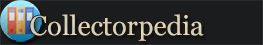
<style>
.page{position:relative;width:263px;height:45px;background:#1b1c1d}
.page>*{position:absolute;margin:0}
.t1{font:27px "Georgia";color:#d4d4c4}
</style>
<div class="page">
<p class="t1" style="left:30px;top:14px;width:174px;height:27px">Collectorpedia</p>
</div>
